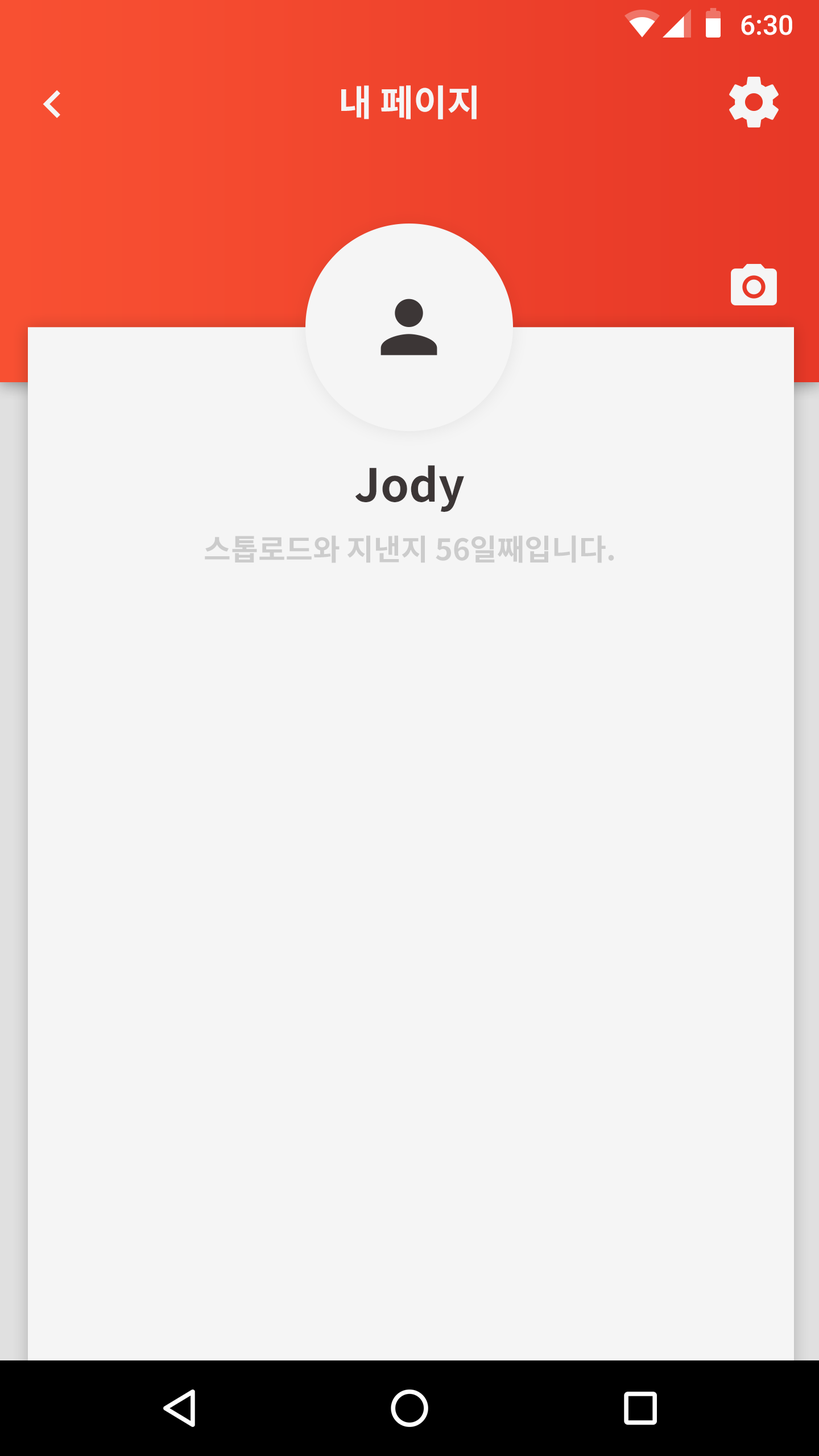
<style>
.page{position:relative;width:819px;height:1456px;background:#f5f5f5}
.page>*{position:absolute;margin:0}
.t1{font:27.3px "Roboto-Medium";color:#ffffff}
.t2{font:36.5px "NotoSansCJKkr-Bold";color:#f5f5f5}
.t3{font:45.5px "NotoSansCJKkr-Bold";color:#3c3636}
.t4{font:29.5px "NotoSansCJKkr-Bold";color:#cccccc}
</style>
<div class="page">
<p class="t1" style="left:741px;top:15px;width:51px;height:20px">6:30</p>
<p class="t2" style="left:341px;top:85px;width:136px;height:34px">내 페이지</p>
<p class="t3" style="left:355px;top:465px;width:109px;height:47px">Jody</p>
<p class="t4" style="left:205px;top:535px;width:409px;height:28px">스톱로드와 지낸지 56일째입니다.</p>
</div>
